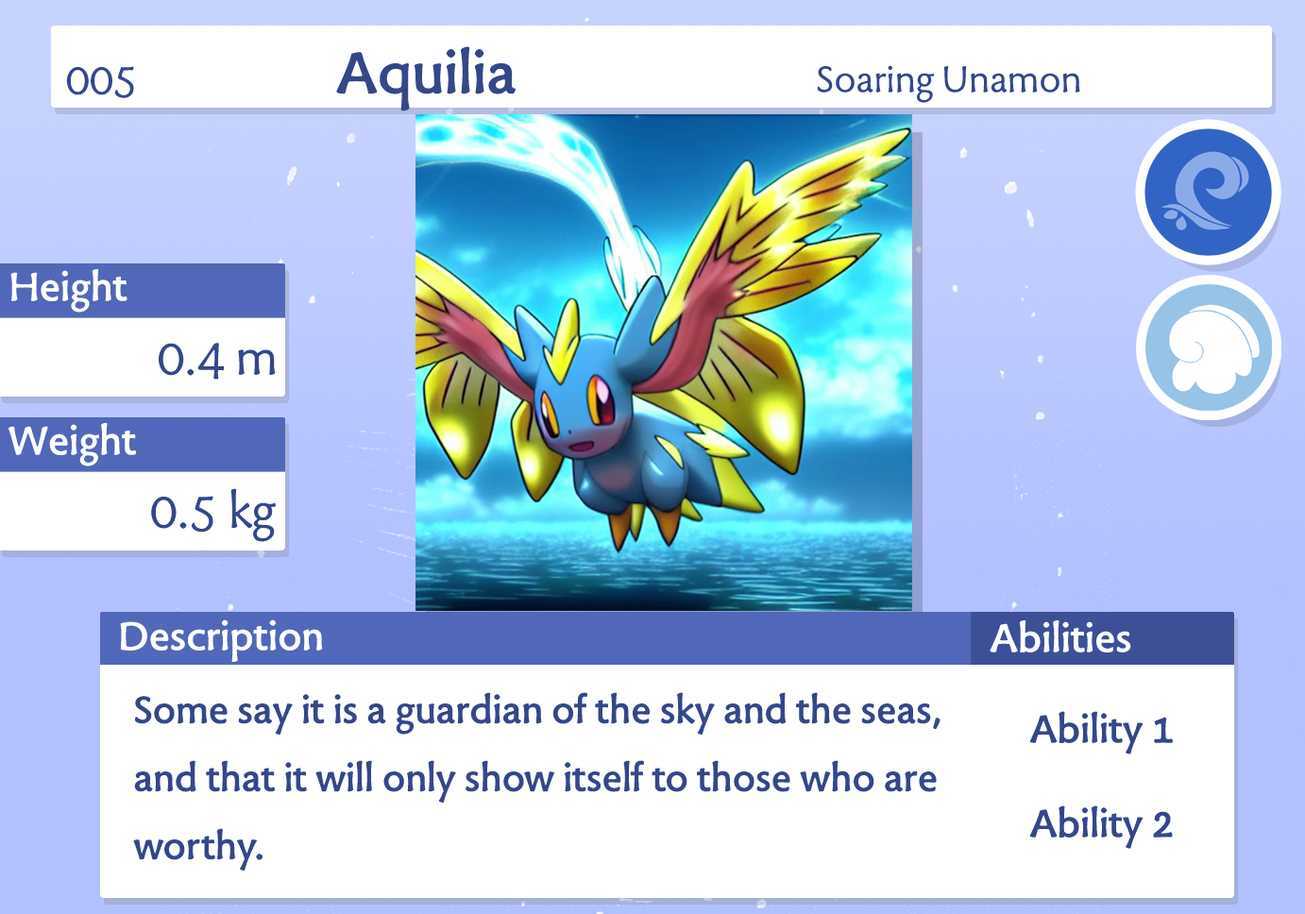
<style>
.page{position:relative;width:1305px;height:914px;background:#ffffff}
.page>*{position:absolute;margin:0}
.t1{font:68px "TuffW01-Bold";color:#364786}
.t2{font:42.8px "TuffW01-Normal";color:#364786}
.t3{font:49.5px "TuffW01-Normal";color:#374888}
.t4{font:46.3px "TuffW01-Bold";color:#ffffff}
.t5{font:56.7px "TuffW01-Normal";color:#364786}
.t6{font:44.6px/68px "TuffW01-Bold";color:#364786}
.t7{font:45.3px/94.4px "TuffW01-Bold";color:#364786}
</style>
<div class="page">
<p class="t1" style="left:336px;top:46px;width:179px;height:65px">Aquilia</p>
<p class="t2" style="left:817px;top:65px;width:263px;height:38px">Soaring Unamon</p>
<p class="t3" style="left:66px;top:66px;width:68px;height:32px">005</p>
<p class="t4" style="left:10px;top:269px;width:117px;height:44px">Height</p>
<p class="t5" style="left:159px;top:343px;width:117px;height:37px">0.4 m</p>
<p class="t4" style="left:8px;top:423px;width:128px;height:43px">Weight</p>
<p class="t5" style="left:151px;top:488px;width:125px;height:54px">0.5 kg</p>
<p class="t4" style="left:120px;top:619px;width:203px;height:43px">Description</p>
<p class="t4" style="left:989px;top:620px;width:142px;height:32px">Abilities</p>
<p class="t6" style="left:133px;top:692px;width:807px;height:178px">Some say it is a guardian of the sky and the seas,<br>and that it will only show itself to those who are<br>worthy.</p>
<p class="t7" style="left:1029px;top:711px;width:144px;height:138px;text-align:center">Ability 1<br>Ability 2</p>
</div>
